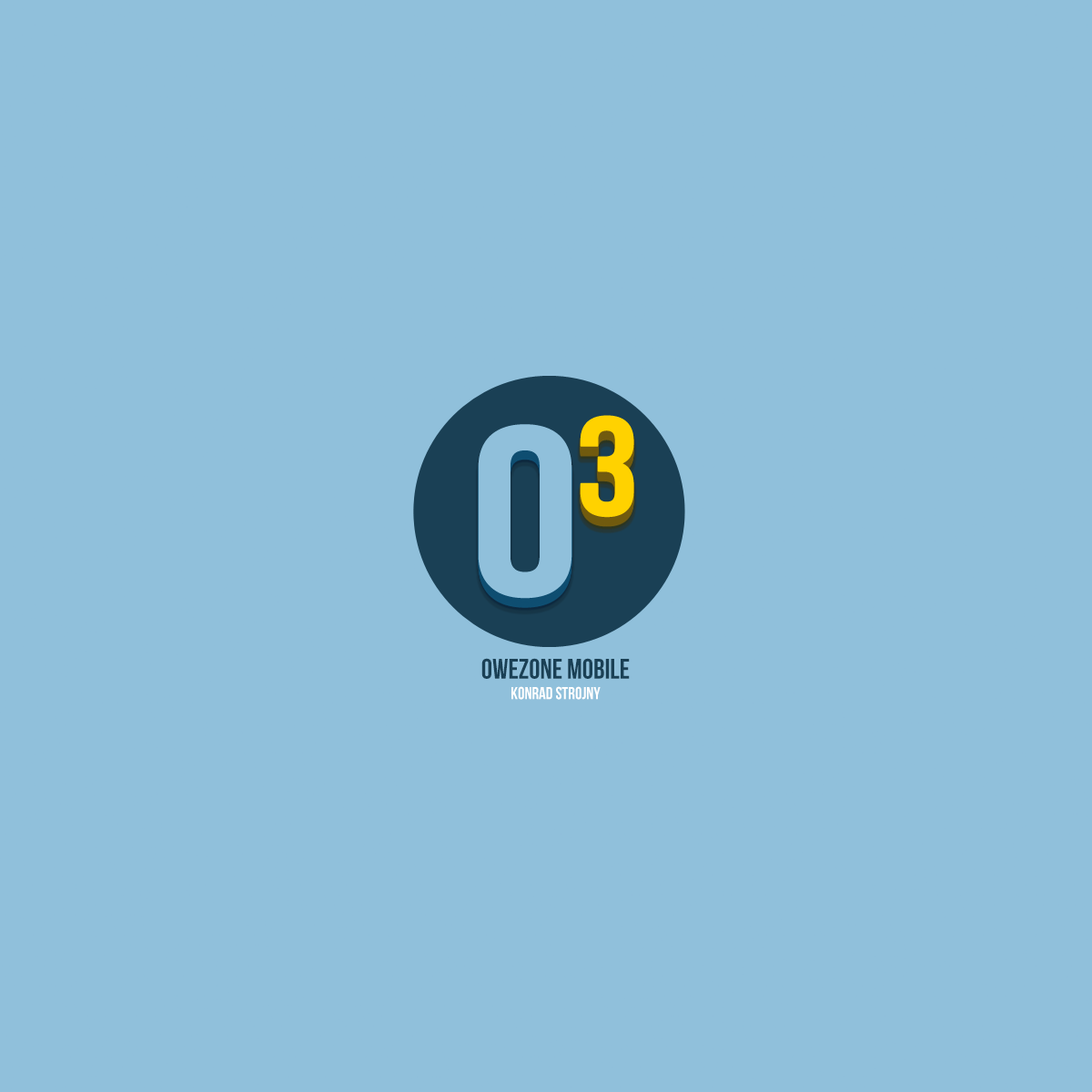
<style>
.page{position:relative;width:1092px;height:1092px;background:#90c0db}
.page>*{position:absolute;margin:0}
.t1{font:28.1px "BebasNeue";color:#1a4055}
.t2{font:17.2px "BebasNeue";color:#ffffff}
</style>
<div class="page">
<p class="t1" style="left:481px;top:658px;width:149px;height:42px;text-align:center">OWEZONE MOBILE<br><span class="t2">Konrad Strojny</span></p>
</div>
